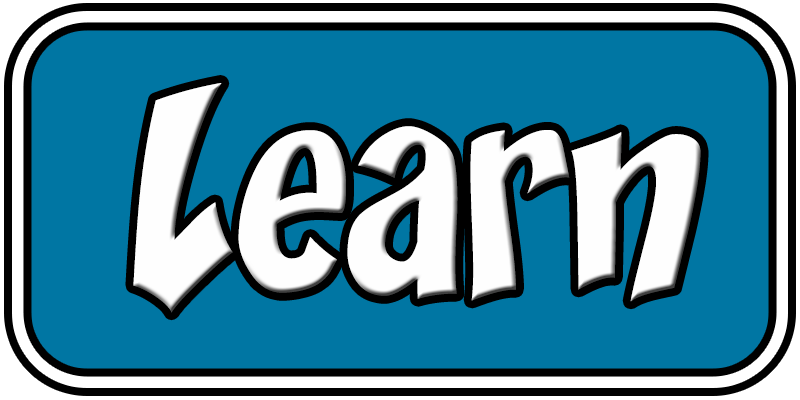
<style>
.page{position:relative;width:800px;height:400px;background:#0076a3}
.page>*{position:absolute;margin:0}
.t1{font:266.7px "Yikes";color:#fefefe}
</style>
<div class="page">
<p class="t1" style="left:133px;top:83px;width:568px;height:230px">Learn</p>
</div>
